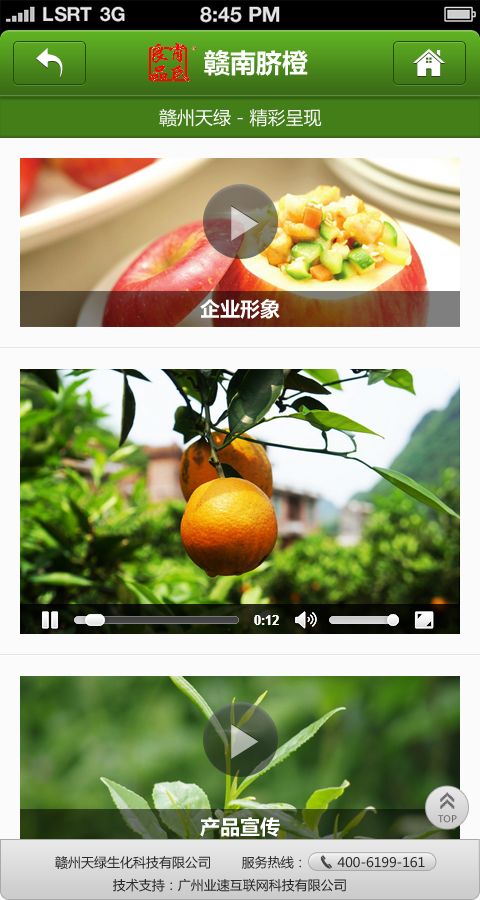
<style>
.page{position:relative;width:480px;height:900px}
.page>*{position:absolute;margin:0}
.t1{font:26px "MicrosoftYaHeiBold";color:#ffffff}
.t2{font:18px "MicrosoftYaHei";color:#ffffff}
.t3{font:20px "MicrosoftYaHeiBold";color:#ffffff}
.t4{font:26px "8514oem";letter-spacing:-0.2em;color:#6f6f6f;font-weight:bold}
.t5{font:9.3px "MicrosoftYaHei";color:#686868}
.t6{font:13px "MicrosoftYaHei";color:#2c2c2c}
</style>
<div class="page">
<p class="t1" style="left:204px;top:50px;width:104px;height:26px">赣南脐橙</p>
<p class="t2" style="left:159px;top:108px;width:163px;height:19px">赣州天绿 - 精彩呈现</p>
<p class="t3" style="left:200px;top:299px;width:80px;height:20px">企业形象</p>
<p class="t4" style="left:440px;top:792px;width:15px;height:17px;rotate:-90deg">&gt;&gt;</p>
<p class="t3" style="left:200px;top:817px;width:80px;height:20px">产品宣传</p>
<p class="t5" style="left:438px;top:815px;width:19px;height:8px">TOP</p>
<p class="t6" style="left:55px;top:856px;width:370px;height:36px">赣州天绿生化科技有限公司        服务热线：        400-6199-161<br>               技术支持：广州业速互联网科技有限公司</p>
</div>
